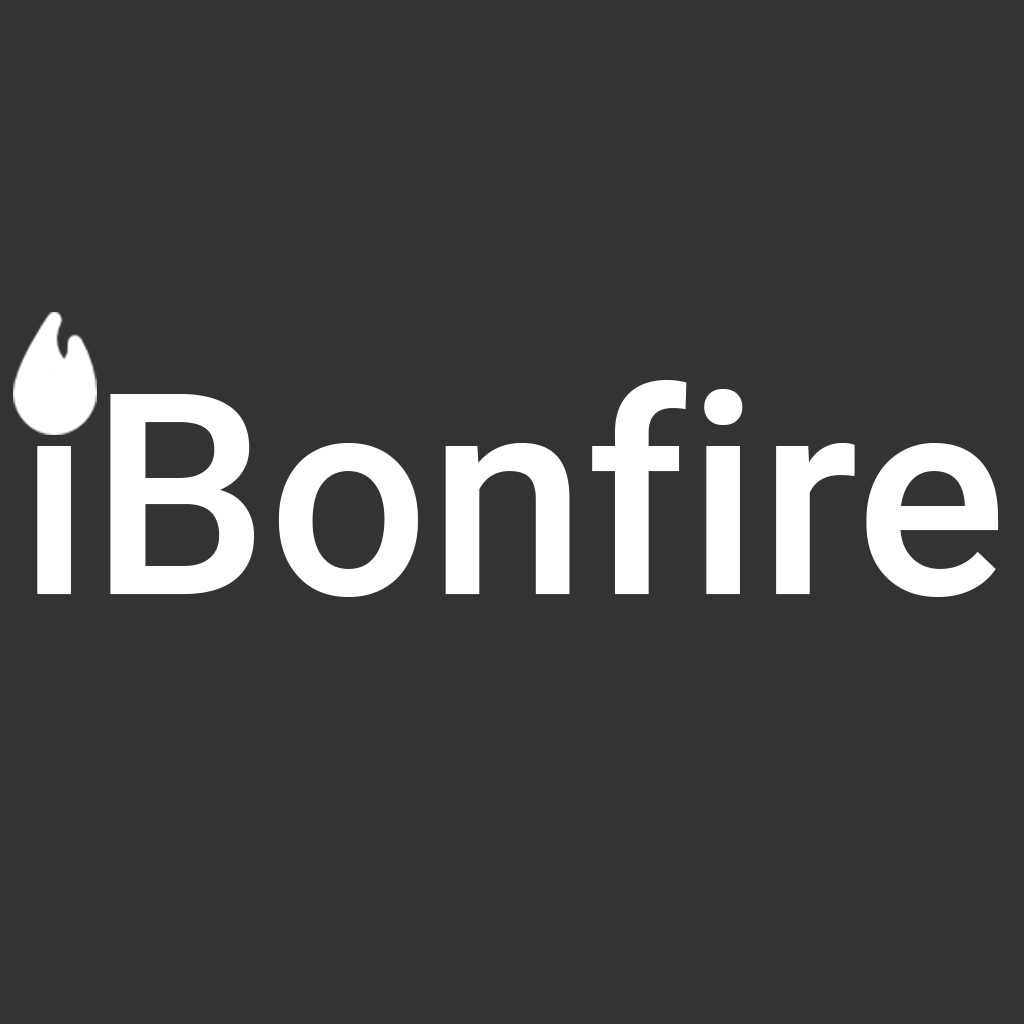
<style>
.page{position:relative;width:1024px;height:1024px;background:#333333}
.page>*{position:absolute;margin:0}
.t1{font:280.5px "Roboto-Medium";color:#ffffff}
</style>
<div class="page">
<p class="t1" style="left:35px;top:380px;width:964px;height:217px">iBonfire</p>
</div>
